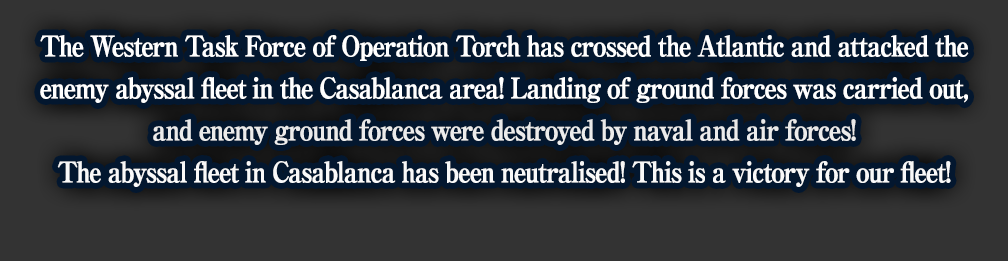
<style>
.page{position:relative;width:1008px;height:261px;background:#333333}
.page>*{position:absolute;margin:0}
.t1{font:28px/42px "RyuminPro-ExBold";letter-spacing:-0.08em;color:#ffffff;font-weight:bold;scale:0.9 1}
</style>
<div class="page">
<p class="t1" style="left:40px;top:35px;width:929px;height:152px;text-align:center">The Western Task Force of Operation Torch has crossed the Atlantic and attacked the<br>enemy abyssal fleet in the Casablanca area! Landing of ground forces was carried out,<br>and enemy ground forces were destroyed by naval and air forces!<br>The abyssal fleet in Casablanca has been neutralised! This is a victory for our fleet!</p>
</div>
